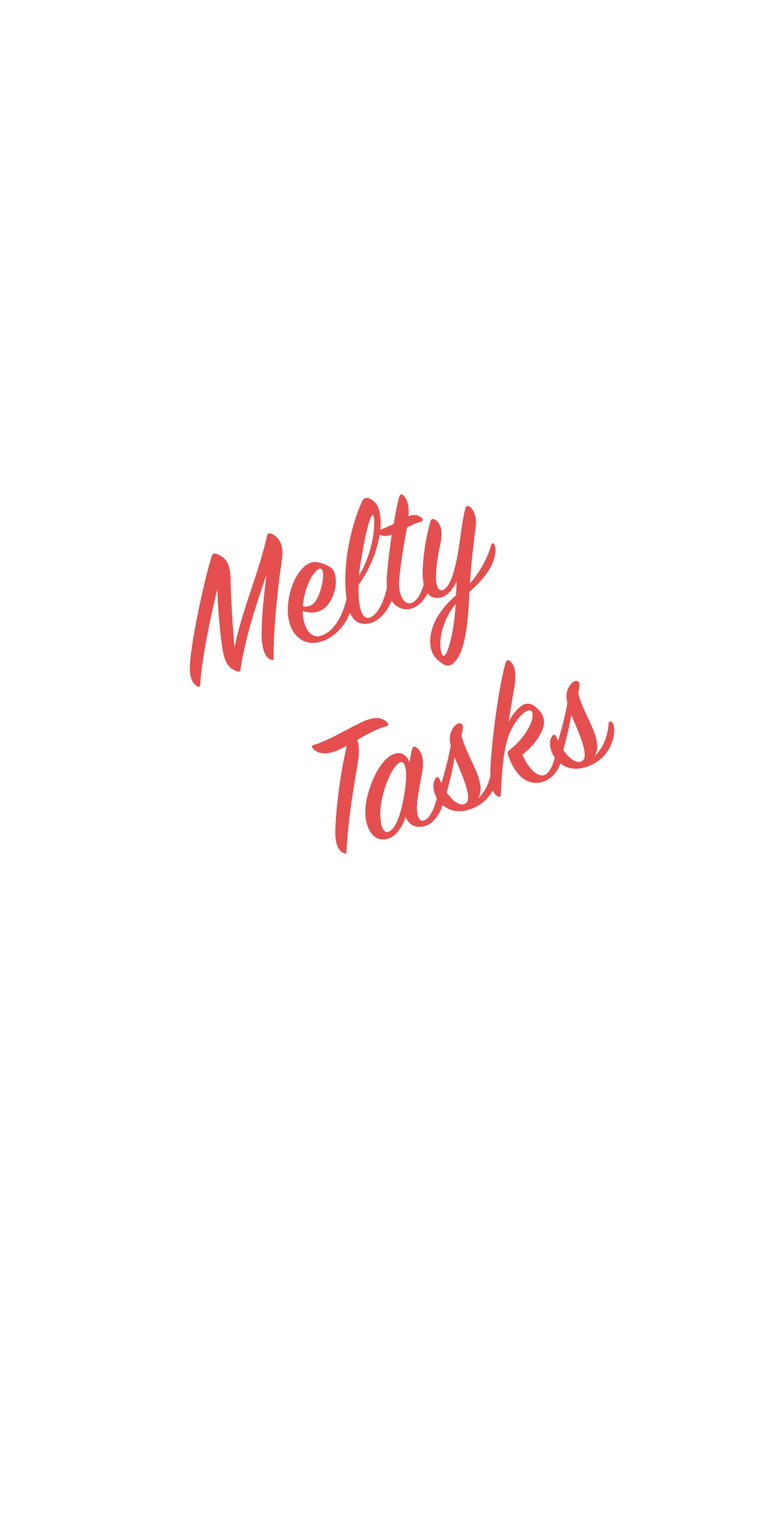
<style>
.page{position:relative;width:780px;height:1529px;background:#ffffff}
.page>*{position:absolute;margin:0}
.t1{font:188.3px "SignPainter-HouseScript";color:#e54e4e}
</style>
<div class="page">
<p class="t1" style="left:190px;top:494px;width:305px;height:193px;rotate:-20deg">Melty</p>
<p class="t1" style="left:311px;top:660px;width:303px;height:194px;rotate:-20deg">Tasks</p>
</div>
